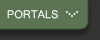
<style>
.page{position:relative;width:100px;height:40px;background:#5c7452}
.page>*{position:absolute;margin:0}
.t1{font:14px "Microsoft-Yi-Baiti";letter-spacing:0.025em;color:#ffffff}
</style>
<div class="page">
<p class="t1" style="left:7px;top:10px;width:51px;height:9px">PORTALS</p>
</div>
